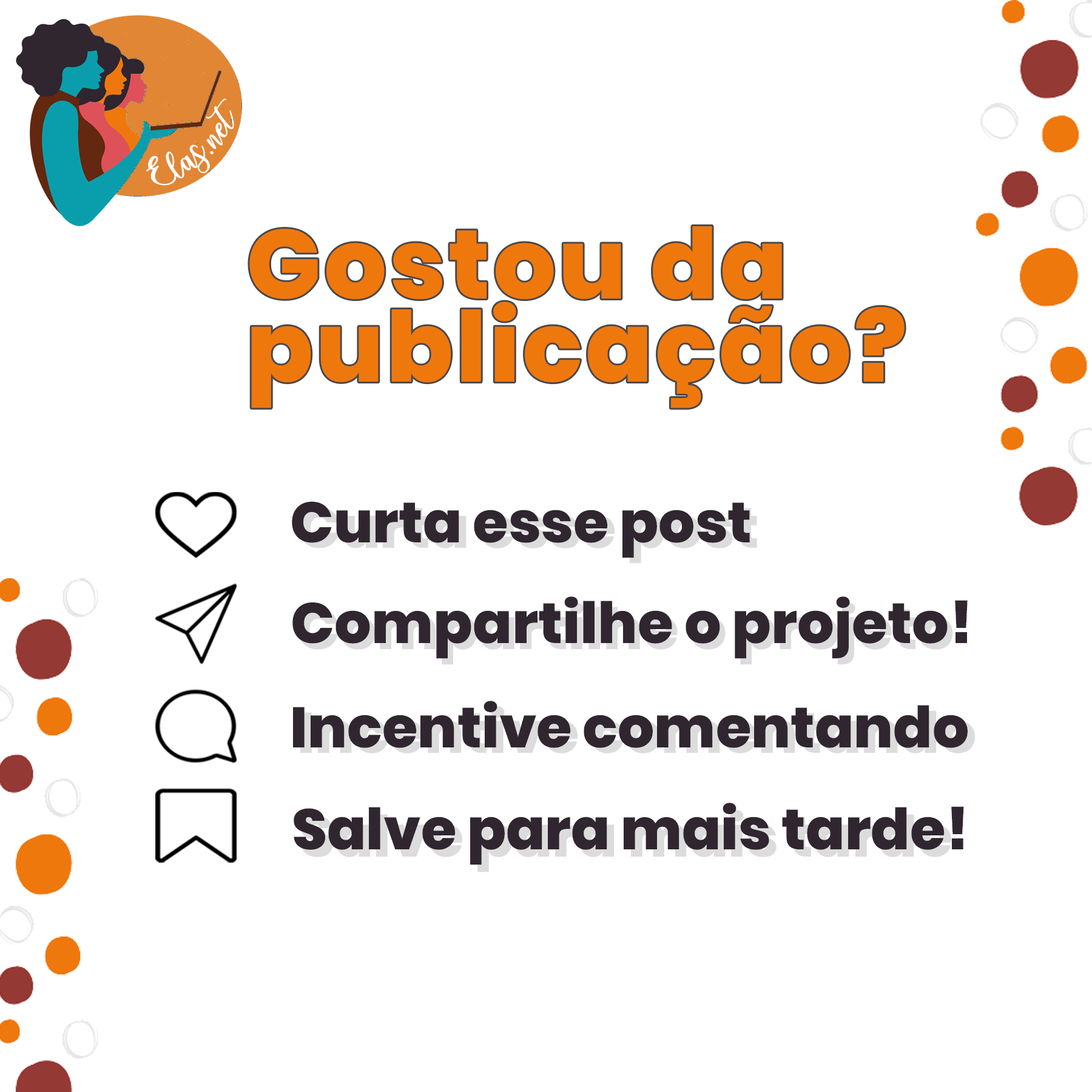
<style>
.page{position:relative;width:1092px;height:1092px;background:#ffffff}
.page>*{position:absolute;margin:0}
.t1{font:25px "charlinda-Regular";color:#ffffff;scale:1.18 1}
.t2{font:97.6px/83.1px "Poppins-ExtraBold";letter-spacing:0.03em;color:#ef780d}
.t3{font:56.9px "Poppins-ExtraBold";color:#2f262f}
.t4{font:56.9px "Poppins-ExtraBold"}
</style>
<div class="page">
<p class="t1" style="left:146px;top:98px;width:88px;height:88px;rotate:-42deg">Elas.net</p>
<p class="t2" style="left:249px;top:226px;width:656px;height:182px">Gostou da<br>publicação?</p>
<p class="t3" style="left:292px;top:502px;width:458px;height:56px">Curta esse post</p>
<p class="t3" style="left:292px;top:596px;width:676px;height:63px">Compartilhe o projeto!</p>
<p class="t4" style="left:298px;top:602px;width:655px;height:63px">Compartilhe o projeto</p>
<p class="t3" style="left:293px;top:701px;width:675px;height:47px">Incentive comentando</p>
<p class="t3" style="left:294px;top:803px;width:670px;height:62px">Salve para mais tarde!</p>
</div>
